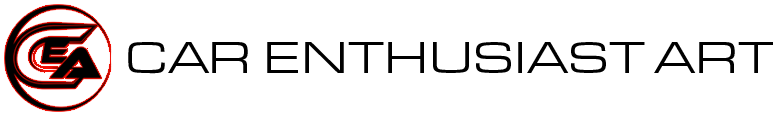
<style>
.page{position:relative;width:773px;height:115px;background:#ffffff}
.page>*{position:absolute;margin:0}
.t1{font:45.8px "EurostileExt-Reg";color:#000000}
</style>
<div class="page">
<p class="t1" style="left:128px;top:42px;width:646px;height:32px">CAR ENTHUSIAST ART</p>
</div>
